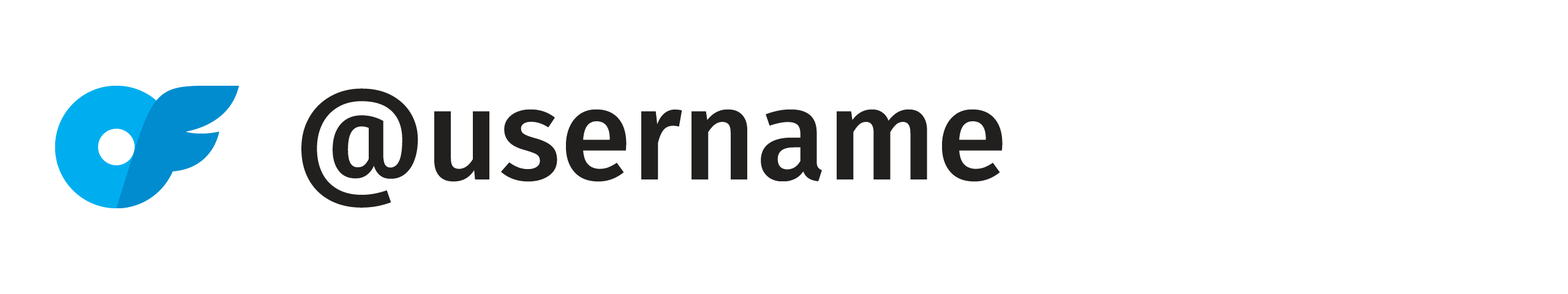
<style>
.page{position:relative;width:1568px;height:294px;background:#ffffff}
.page>*{position:absolute;margin:0}
.t1{font:128.6px "FiraSans-Medium";color:#231f20}
</style>
<div class="page">
<p class="t1" style="left:301px;top:88px;width:702px;height:120px">@username</p>
</div>
